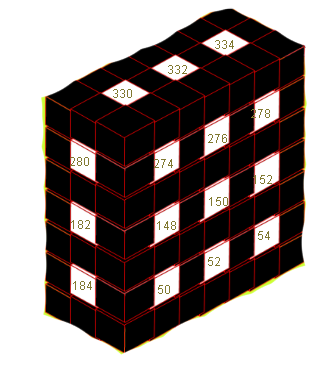
<style>
.page{position:relative;width:335px;height:366px;background:#ffffff}
.page>*{position:absolute;margin:0}
.t1{font:12px "ArialMT";color:#817931}
</style>
<div class="page">
<p class="t1" style="left:215px;top:40px;width:19px;height:9px">334</p>
<p class="t1" style="left:168px;top:65px;width:19px;height:9px">332</p>
<p class="t1" style="left:113px;top:89px;width:19px;height:9px">330</p>
<p class="t1" style="left:251px;top:109px;width:19px;height:9px">278</p>
<p class="t1" style="left:208px;top:134px;width:19px;height:9px">276</p>
<p class="t1" style="left:70px;top:157px;width:19px;height:9px">280</p>
<p class="t1" style="left:154px;top:159px;width:19px;height:9px">274</p>
<p class="t1" style="left:253px;top:175px;width:19px;height:9px">152</p>
<p class="t1" style="left:209px;top:197px;width:19px;height:9px">150</p>
<p class="t1" style="left:71px;top:220px;width:19px;height:9px">182</p>
<p class="t1" style="left:157px;top:221px;width:19px;height:9px">148</p>
<p class="t1" style="left:258px;top:231px;width:12px;height:9px">54</p>
<p class="t1" style="left:208px;top:257px;width:12px;height:9px">52</p>
<p class="t1" style="left:73px;top:281px;width:19px;height:9px">184</p>
<p class="t1" style="left:158px;top:285px;width:12px;height:9px">50</p>
</div>
